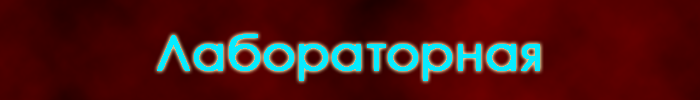
<style>
.page{position:relative;width:700px;height:100px}
.page>*{position:absolute;margin:0}
.t1{font:49.4px "CenturyGothic";color:#16f2ff;font-weight:bold}
</style>
<div class="page">
<p class="t1" style="left:157px;top:34px;width:383px;height:47px">Лабораторная</p>
</div>
